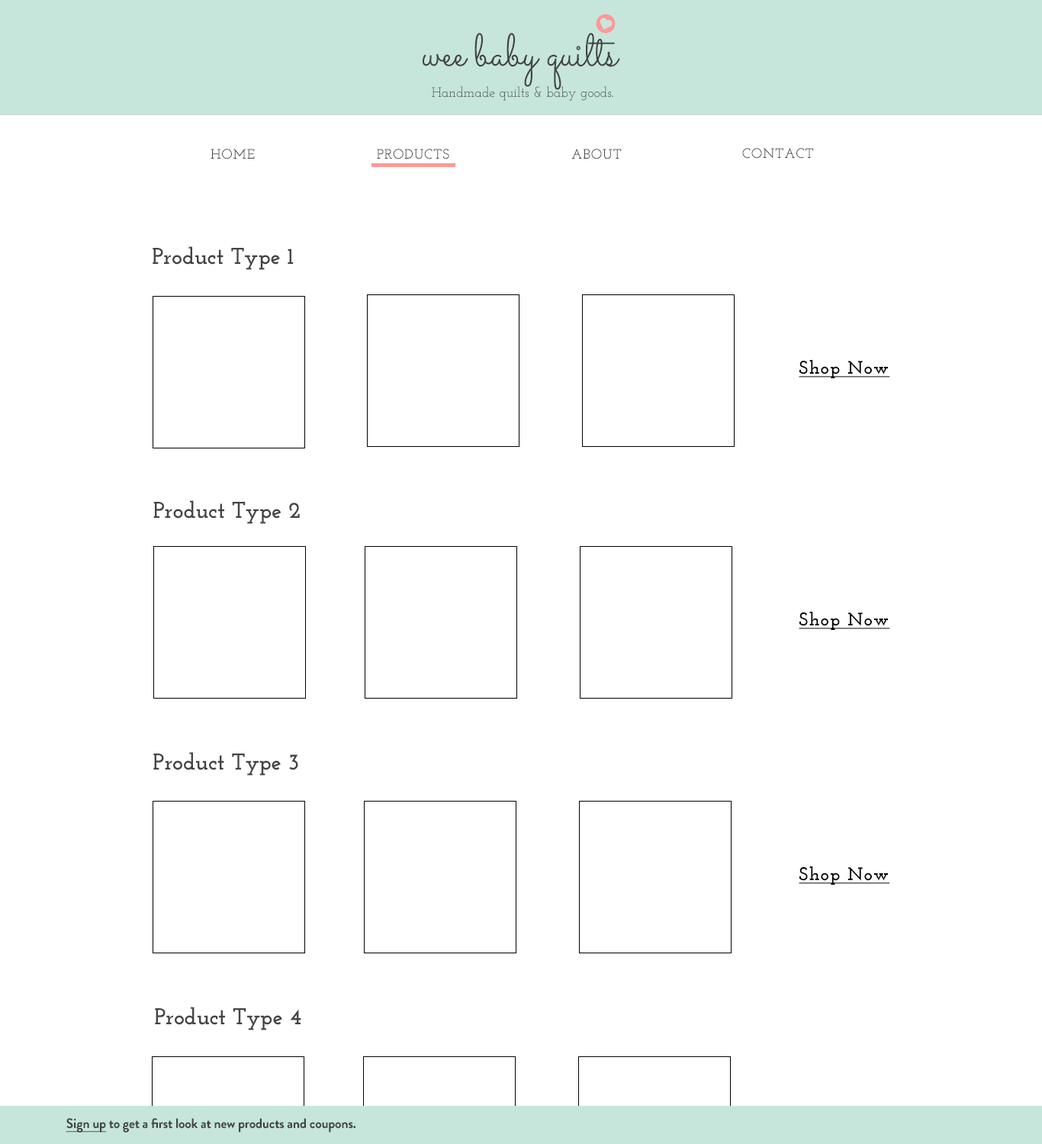
<style>
.page{position:relative;width:1042px;height:1144px;background:#ffffff}
.page>*{position:absolute;margin:0}
.t1{font:45.8px "Sacramento-Regular";letter-spacing:-0.01em;color:#444444}
.t2{font:13.7px "JosefinSlab-Regular";letter-spacing:-0.01em;color:#444444}
.t3{font:13.7px "JosefinSlab-SemiBold";letter-spacing:0.05em;color:#444444}
.t4{font:22.9px "JosefinSlab-Bold";letter-spacing:-0.01em;color:#444444}
.t5{font:18.3px "JosefinSlab-Bold";letter-spacing:0.05em;color:#000000;text-decoration:underline}
.t6{font:13.7px "BrandonGrotesque-Bold";letter-spacing:-0.01em;color:#444444}
.t7{font:13.7px "BrandonGrotesque-Bold";letter-spacing:-0.01em;color:#444444;text-decoration:underline}
</style>
<div class="page">
<p class="t1" style="left:423px;top:33px;width:197px;height:57px">wee baby quilts</p>
<p class="t2" style="left:432px;top:86px;width:181px;height:15px">Handmade quilts &amp; baby goods.</p>
<p class="t3" style="left:211px;top:149px;width:44px;height:10px">HOME</p>
<p class="t3" style="left:377px;top:149px;width:72px;height:10px">PRODUCTS</p>
<p class="t3" style="left:571px;top:148px;width:51px;height:11px">ABOUT</p>
<p class="t3" style="left:742px;top:147px;width:71px;height:12px">CONTACT</p>
<p class="t4" style="left:153px;top:246px;width:141px;height:24px">Product Type 1</p>
<p class="t5" style="left:799px;top:360px;width:91px;height:18px">Shop Now</p>
<p class="t4" style="left:153px;top:500px;width:147px;height:24px">Product Type 2</p>
<p class="t5" style="left:799px;top:612px;width:91px;height:18px">Shop Now</p>
<p class="t4" style="left:153px;top:752px;width:145px;height:24px">Product Type 3</p>
<p class="t5" style="left:799px;top:867px;width:91px;height:18px">Shop Now</p>
<p class="t4" style="left:155px;top:1007px;width:146px;height:24px">Product Type 4</p>
<p class="t6" style="left:66px;top:1118px;width:290px;height:15px"><span class="t7">Sign up</span> to get a first look at new products and coupons.</p>
</div>
